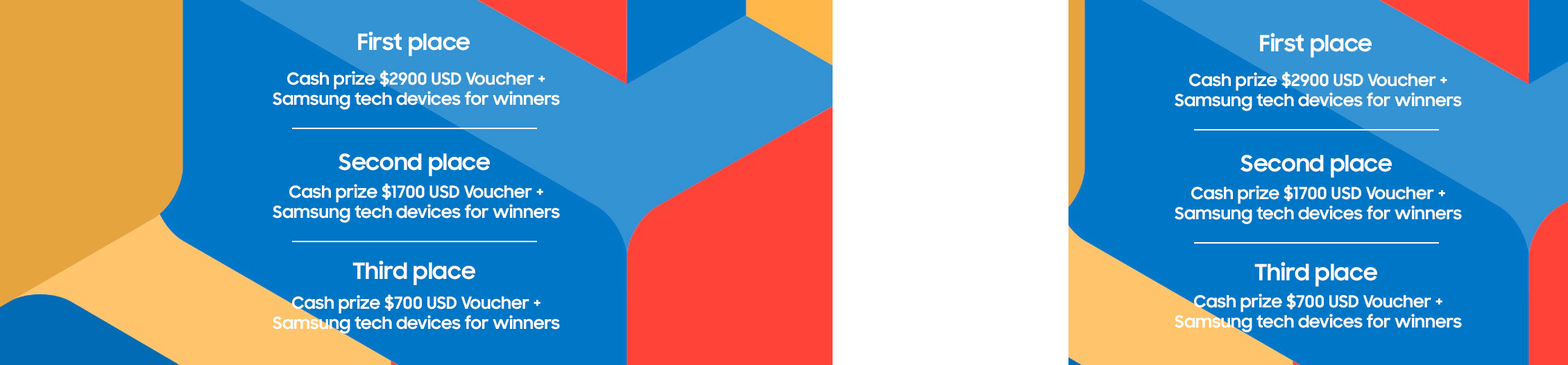
<style>
.page{position:relative;width:1568px;height:365px;background:#0076c6}
.page>*{position:absolute;margin:0}
.t1{font:22.2px "SamsungSharpSans-Bold";color:#ffffff}
.t2{font:16.7px "SamsungSharpSans-Bold";color:#ffffff}
</style>
<div class="page">
<p class="t1" style="left:358px;top:31px;width:112px;height:25px">First place</p>
<p class="t1" style="left:1260px;top:33px;width:112px;height:25px">First place</p>
<p class="t2" style="left:273px;top:70px;width:287px;height:40px;text-align:center">Cash prize $2900 USD Voucher +<br>Samsung tech devices for winners</p>
<p class="t2" style="left:1175px;top:71px;width:287px;height:40px;text-align:center">Cash prize $2900 USD Voucher +<br>Samsung tech devices for winners</p>
<p class="t1" style="left:339px;top:153px;width:151px;height:23px">Second place</p>
<p class="t1" style="left:1241px;top:155px;width:151px;height:23px">Second place</p>
<p class="t2" style="left:273px;top:183px;width:287px;height:40px;text-align:center">Cash prize $1700 USD Voucher +<br>Samsung tech devices for winners</p>
<p class="t2" style="left:1175px;top:185px;width:287px;height:39px;text-align:center">Cash prize $1700 USD Voucher +<br>Samsung tech devices for winners</p>
<p class="t1" style="left:352px;top:260px;width:123px;height:25px">Third place</p>
<p class="t1" style="left:1254px;top:262px;width:123px;height:25px">Third place</p>
<p class="t2" style="left:1175px;top:293px;width:287px;height:39px;text-align:center">Cash prize $700 USD Voucher +<br>Samsung tech devices for winners</p>
<p class="t2" style="left:273px;top:294px;width:287px;height:40px;text-align:center">Cash prize $700 USD Voucher +<br>Samsung tech devices for winners</p>
</div>
